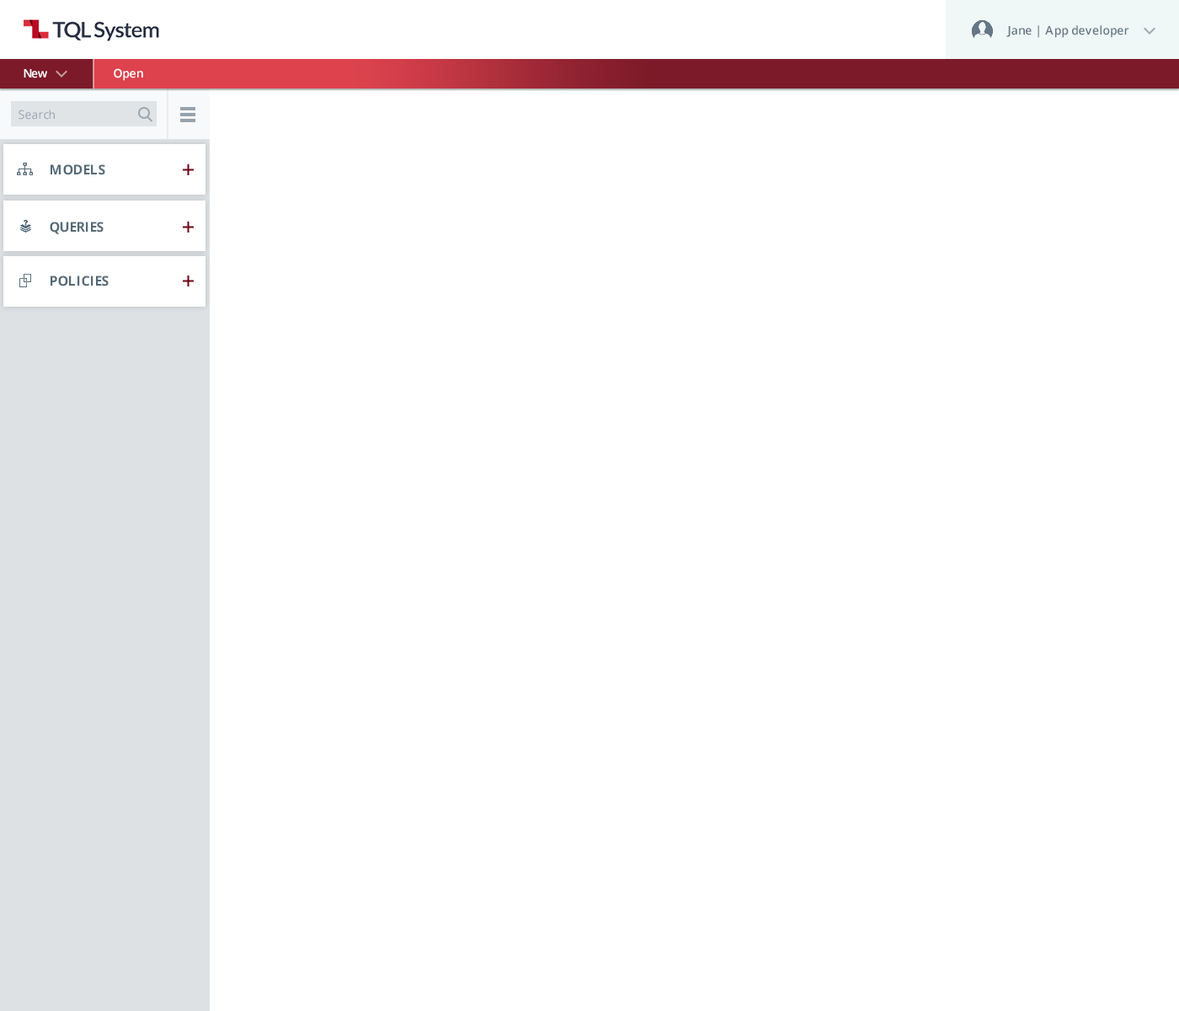
<style>
.page{position:relative;width:1179px;height:1011px;background:#ffffff}
.page>*{position:absolute;margin:0}
.t1{font:11.8px "OpenSans-Semibold";color:#647784}
.t2{font:11.8px "OpenSans-Semibold";letter-spacing:-0.05em;color:#ffffff}
.t3{font:11.8px "OpenSans-Semibold";color:#ffffff}
.t4{font:11.8px "OpenSans";color:#96a2aa}
.t5{font:13.5px "OpenSans-Bold";color:#546a79;text-transform:uppercase}
</style>
<div class="page">
<p class="t1" style="left:1007px;top:25px;width:123px;height:13px">Jane | App developer</p>
<p class="t2" style="left:24px;top:69px;width:23px;height:9px">New</p>
<p class="t3" style="left:114px;top:68px;width:29px;height:13px">Open</p>
<p class="t4" style="left:19px;top:110px;width:36px;height:10px">Search</p>
<p class="t5" style="left:51px;top:164px;width:54px;height:11px">models</p>
<p class="t5" style="left:50px;top:222px;width:54px;height:12px">queries</p>
<p class="t5" style="left:51px;top:275px;width:58px;height:11px">policies</p>
</div>
